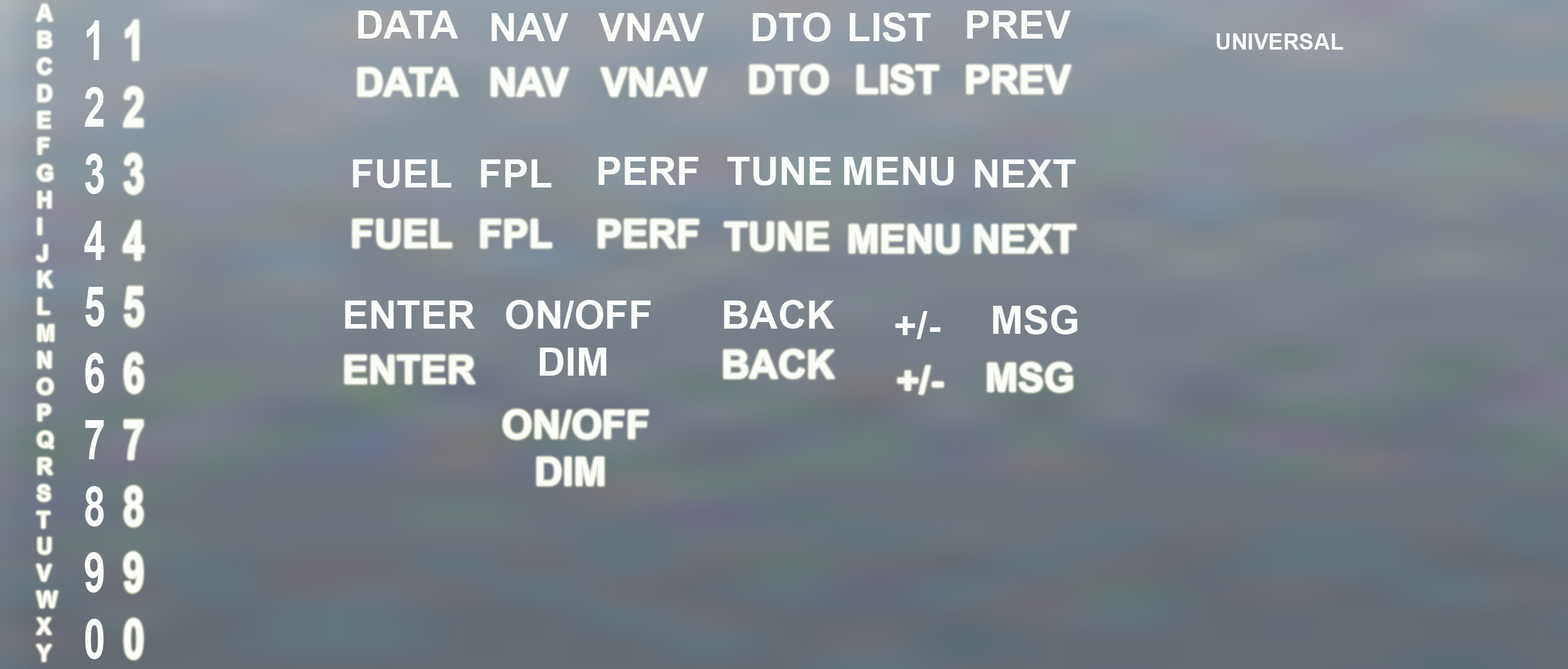
<style>
.page{position:relative;width:1568px;height:669px}
.page>*{position:absolute;margin:0}
.t1{font:22.2px "Arial-BoldMT";color:#fbfdfb}
.t2{font:39.2px "Arial-BoldMT";color:#fbfdfb}
.t3{font:55.4px "Arial-BoldMT";color:#fbfdfb;scale:0.71 1}
</style>
<div class="page">
<p class="t1" style="left:37px;top:5px;width:20px;height:656px">A<br>B<br>C<br>D<br>E<br>F<br>G<br>H<br>I<br>J<br>K<br>L<br>M<br>N<br>O<br>P<br>Q<br>R<br>S<br>T<br>U<br>V<br>W<br>X<br>Y<br>Z</p>
<p class="t2" style="left:358px;top:10px;width:100px;height:29px">DATA</p>
<p class="t2" style="left:491px;top:13px;width:77px;height:28px">NAV</p>
<p class="t2" style="left:598px;top:13px;width:106px;height:28px">VNAV</p>
<p class="t2" style="left:753px;top:12px;width:78px;height:30px">DTO</p>
<p class="t2" style="left:849px;top:12px;width:82px;height:30px">LIST</p>
<p class="t2" style="left:967px;top:10px;width:104px;height:29px">PREV</p>
<p class="t3" style="left:84px;top:20px;width:21px;height:639px">1<br>2<br>3<br>4<br>5<br>6<br>7<br>8<br>9<br>0</p>
<p class="t3" style="left:123px;top:20px;width:21px;height:639px">1<br>2<br>3<br>4<br>5<br>6<br>7<br>8<br>9<br>0</p>
<p class="t1" style="left:1217px;top:33px;width:126px;height:17px">UNIVERSAL</p>
<p class="t2" style="left:750px;top:65px;width:78px;height:29px">DTO</p>
<p class="t2" style="left:857px;top:65px;width:82px;height:29px">LIST</p>
<p class="t2" style="left:967px;top:65px;width:104px;height:28px">PREV</p>
<p class="t2" style="left:358px;top:68px;width:100px;height:28px">DATA</p>
<p class="t2" style="left:491px;top:68px;width:77px;height:28px">NAV</p>
<p class="t2" style="left:601px;top:68px;width:106px;height:28px">VNAV</p>
<p class="t2" style="left:353px;top:159px;width:98px;height:29px">FUEL</p>
<p class="t2" style="left:481px;top:159px;width:70px;height:29px">FPL</p>
<p class="t2" style="left:598px;top:157px;width:100px;height:28px">PERF</p>
<p class="t2" style="left:727px;top:157px;width:104px;height:29px">TUNE</p>
<p class="t2" style="left:844px;top:157px;width:110px;height:29px">MENU</p>
<p class="t2" style="left:975px;top:159px;width:101px;height:29px">NEXT</p>
<p class="t2" style="left:353px;top:220px;width:98px;height:28px">FUEL</p>
<p class="t2" style="left:481px;top:220px;width:70px;height:28px">FPL</p>
<p class="t2" style="left:598px;top:220px;width:100px;height:28px">PERF</p>
<p class="t2" style="left:725px;top:222px;width:103px;height:29px">TUNE</p>
<p class="t2" style="left:849px;top:225px;width:110px;height:28px">MENU</p>
<p class="t2" style="left:975px;top:225px;width:101px;height:28px">NEXT</p>
<p class="t2" style="left:345px;top:301px;width:130px;height:28px">ENTER</p>
<p class="t2" style="left:506px;top:300px;width:145px;height:76px">ON/OFF<br>   DIM</p>
<p class="t2" style="left:724px;top:300px;width:110px;height:29px">BACK</p>
<p class="t2" style="left:993px;top:305px;width:84px;height:30px">MSG</p>
<p class="t2" style="left:895px;top:311px;width:46px;height:28px">+/-</p>
<p class="t2" style="left:724px;top:350px;width:110px;height:28px">BACK</p>
<p class="t2" style="left:345px;top:355px;width:130px;height:29px">ENTER</p>
<p class="t2" style="left:898px;top:366px;width:45px;height:28px">+/-</p>
<p class="t2" style="left:988px;top:363px;width:84px;height:29px">MSG</p>
<p class="t2" style="left:503px;top:410px;width:145px;height:75px">ON/OFF<br>   DIM</p>
</div>
